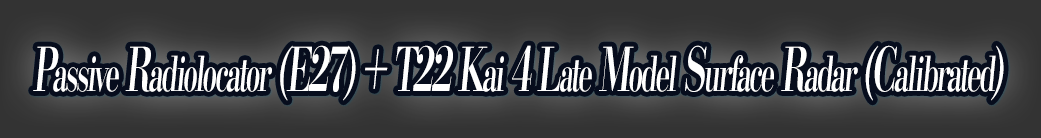
<style>
.page{position:relative;width:1041px;height:138px;background:#333333}
.page>*{position:absolute;margin:0}
.t1{font:60px "KochoStd-Heavy";letter-spacing:-0.08em;color:#ffffff;font-style:italic;scale:0.56 1}
.t2{font:48px "KochoStd-Heavy";letter-spacing:-0.08em;color:#ffffff;font-style:italic;scale:0.56 1}
</style>
<div class="page">
<p class="t1" style="left:33px;top:45px;width:971px;height:56px">P<span class="t2">assive</span> R<span class="t2">adiolocator</span> (E27) + T22 K<span class="t2">ai</span> 4 L<span class="t2">ａte</span> M<span class="t2">odel</span> S<span class="t2">urface</span> R<span class="t2">adar</span> (C<span class="t2">alibrated</span>)</p>
</div>
